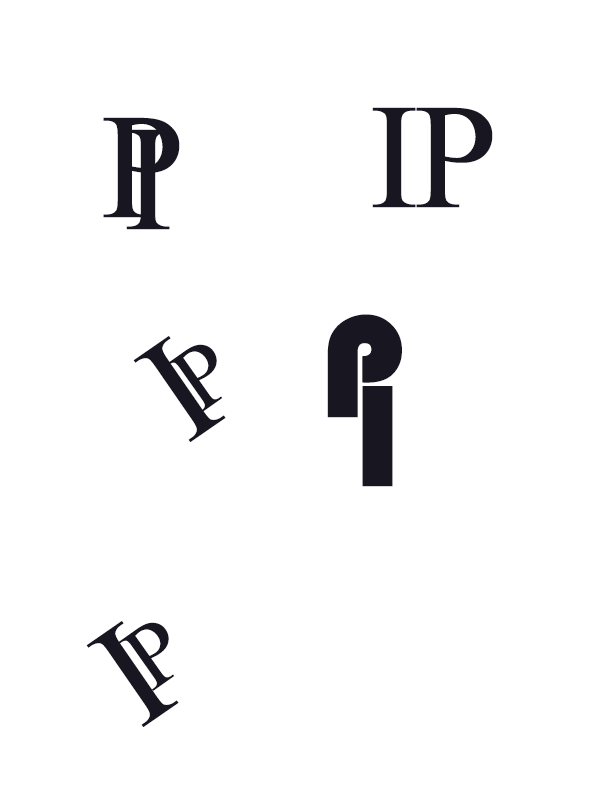
<style>
.page{position:relative;width:612px;height:792px;background:#ffffff}
.page>*{position:absolute;margin:0}
.t1{font:150px "TimesNewRomanPSMT";letter-spacing:0.02em;color:#181621}
.t2{font:150px "Bauhaus93";letter-spacing:0.02em;color:#181621}
.t3{font:90px "TimesNewRomanPSMT";letter-spacing:0.02em;color:#181621}
</style>
<div class="page">
<p class="t1" style="left:372px;top:107px;width:44px;height:101px">I</p>
<p class="t1" style="left:416px;top:107px;width:77px;height:101px">P</p>
<p class="t1" style="left:103px;top:117px;width:77px;height:101px">P</p>
<p class="t1" style="left:126px;top:129px;width:44px;height:101px">I</p>
<p class="t2" style="left:327px;top:314px;width:75px;height:104px">P</p>
<p class="t1" style="left:133px;top:336px;width:93px;height:106px;rotate:-35deg">I</p>
<p class="t3" style="left:166px;top:344px;width:56px;height:69px;rotate:-35deg">P</p>
<p class="t2" style="left:362px;top:386px;width:31px;height:101px">I</p>
<p class="t1" style="left:86px;top:621px;width:93px;height:106px;rotate:-35deg">I</p>
<p class="t3" style="left:118px;top:622px;width:56px;height:69px;rotate:-35deg">P</p>
</div>
